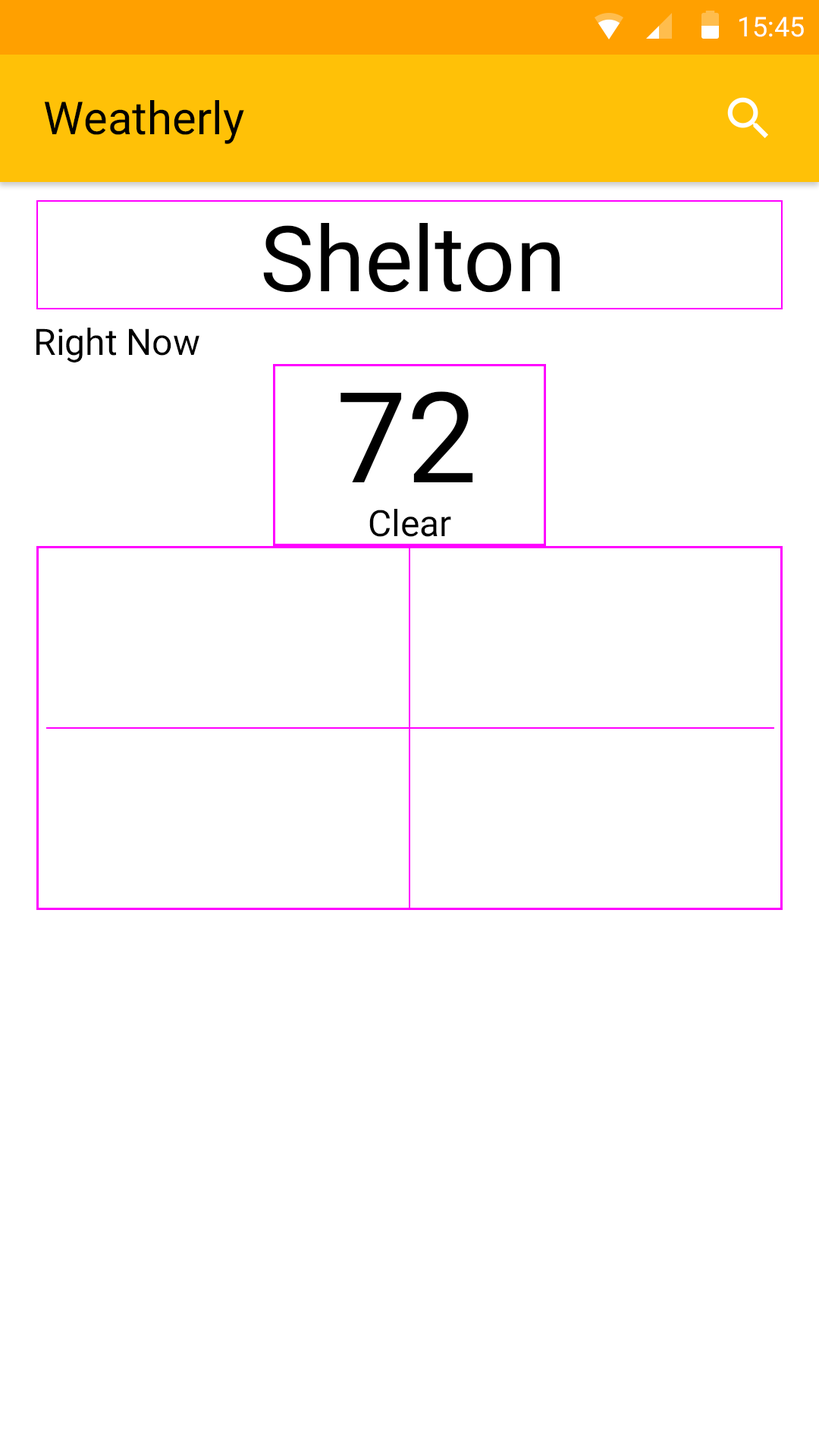
<style>
.page{position:relative;width:819px;height:1456px;background:#ffffff}
.page>*{position:absolute;margin:0}
.t1{font:27.3px "Roboto-Regular";color:#ffffff}
.t2{font:45.5px "Roboto-Regular";color:#010101}
.t3{font:91px "Roboto-Regular";color:#000000}
.t4{font:36.4px "Roboto-Regular";color:#000000}
.t5{font:125.9px "Roboto-Regular";color:#000000}
</style>
<div class="page">
<p class="t1" style="left:739px;top:17px;width:65px;height:20px">15:45</p>
<p class="t2" style="left:44px;top:100px;width:200px;height:44px">Weatherly</p>
<p class="t3" style="left:263px;top:223px;width:297px;height:70px">Shelton</p>
<p class="t4" style="left:36px;top:328px;width:163px;height:34px">Right Now</p>
<p class="t5" style="left:340px;top:391px;width:133px;height:91px">72</p>
<p class="t4" style="left:369px;top:509px;width:82px;height:28px">Clear</p>
</div>
